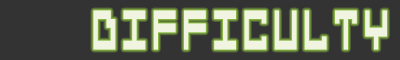
<style>
.page{position:relative;width:400px;height:60px;background:#333333}
.page>*{position:absolute;margin:0}
.t1{font:34.7px "5Computers-In-Love";color:#f1f4e0}
</style>
<div class="page">
<p class="t1" style="left:93px;top:10px;width:294px;height:40px">Difficulty</p>
</div>
